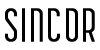
<style>
.page{position:relative;width:100px;height:50px;background:#ffffff}
.page>*{position:absolute;margin:0}
.t1{font:46.8px "Chase";letter-spacing:0.05em;color:#000000;font-weight:bold}
</style>
<div class="page">
<p class="t1" style="left:5px;top:8px;width:90px;height:34px">SINCOR</p>
</div>
